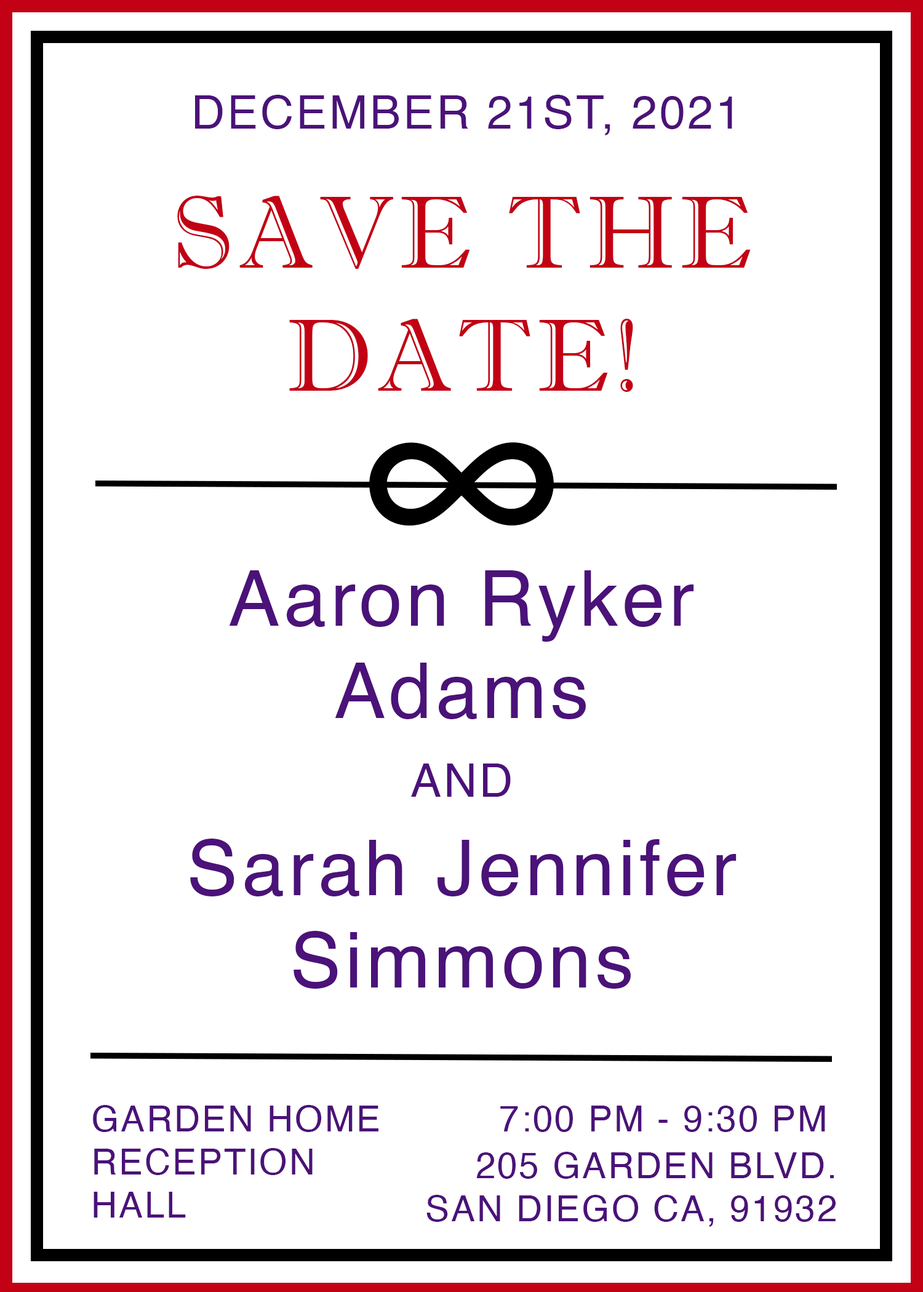
<style>
.page{position:relative;width:923px;height:1292px;background:#ffffff}
.page>*{position:absolute;margin:0}
.t1{font:46.1px "Helvetica";letter-spacing:0.05em;color:#4b1279}
.t2{font:102.5px "ImprintMT-Shadow";letter-spacing:0.05em;color:#c20114}
.t3{font:76.9px "Helvetica";letter-spacing:0.05em;color:#4b1279}
.t4{font:82px "Helvetica";letter-spacing:0.05em;color:#4b1279}
.t5{font:35.9px "Helvetica";letter-spacing:0.05em;color:#4b1279}
</style>
<div class="page">
<p class="t1" style="left:195px;top:95px;width:537px;height:40px">DECEMBER 21ST, 2021</p>
<p class="t2" style="left:177px;top:196px;width:574px;height:196px;text-align:center">SAVE THE<br>DATE!</p>
<p class="t3" style="left:229px;top:570px;width:465px;height:149px;text-align:center"><span class="t4"><br></span>Aaron Ryker<br>Adams</p>
<p class="t1" style="left:411px;top:764px;width:100px;height:33px">AND</p>
<p class="t3" style="left:190px;top:839px;width:546px;height:150px;text-align:center"><span class="t4"><br></span>Sarah Jennifer<br>Simmons</p>
<p class="t5" style="left:93px;top:1105px;width:285px;height:113px">GARDEN HOME RECEPTION <br>HALL</p>
<p class="t5" style="left:500px;top:1106px;width:325px;height:26px">7:00 PM - 9:30 PM</p>
<p class="t5" style="left:426px;top:1152px;width:410px;height:75px;text-align:right">205 GARDEN BLVD. SAN DIEGO CA, 91932</p>
</div>
